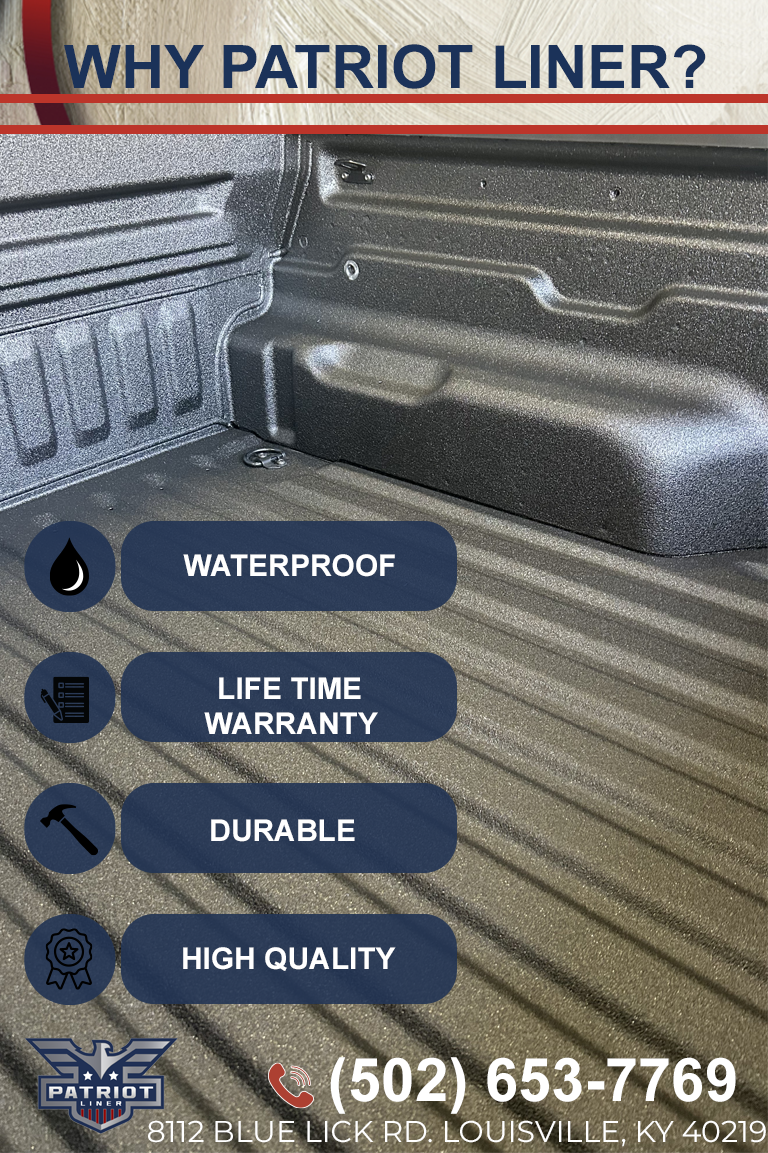
<style>
.page{position:relative;width:768px;height:1153px}
.page>*{position:absolute;margin:0}
.t1{font:60px "Arial-BoldMT";color:#1b3259;text-transform:uppercase}
.t2{font:30px "Arial-BoldMT";color:#ffffff;text-transform:uppercase}
.t3{font:60px "Arial-BoldMT";color:#ffffff;text-transform:uppercase}
.t4{font:30px "Montserrat-Regular";color:#ffffff;text-transform:uppercase}
</style>
<div class="page">
<p class="t1" style="left:64px;top:44px;width:642px;height:45px">WHY PATRIOT LINER?</p>
<p class="t2" style="left:183px;top:554px;width:212px;height:23px">WaterProof</p>
<p class="t2" style="left:219px;top:677px;width:142px;height:22px">Life Time</p>
<p class="t2" style="left:204px;top:712px;width:174px;height:22px">Warranty</p>
<p class="t2" style="left:211px;top:819px;width:144px;height:23px">DURABLE</p>
<p class="t2" style="left:183px;top:947px;width:213px;height:24px">High quality</p>
<p class="t3" style="left:330px;top:1057px;width:406px;height:57px">(502) 653-7769</p>
<p class="t4" style="left:148px;top:1120px;width:618px;height:27px">8112 Blue lick rd. Louisville, ky 40219</p>
</div>
